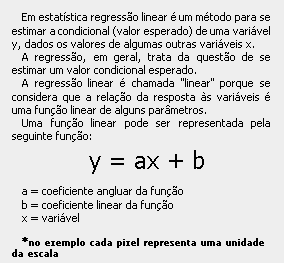
<style>
.page{position:relative;width:284px;height:263px;background:#eeeeee}
.page>*{position:absolute;margin:0}
.t1{font:11px "Tahoma";color:#000000}
.t2{font:24px "Tahoma";color:#000000}
.t3{font:9px "Tahoma";color:#000000;font-weight:bold}
</style>
<div class="page">
<p class="t1" style="left:12px;top:12px;width:258px;height:245px;text-align:justify">Em estatística regressão linear é um método para se estimar a condicional (valor esperado) de uma variável y, dados os valores de algumas outras variáveis x.<br>A regressão, em geral, trata da questão de se estimar um valor condicional esperado.<br>A regressão linear é chamada "linear" porque se considera que a relação da resposta às variáveis é uma função linear de alguns parâmetros.<br>Uma função linear pode ser representada pela seguinte função:<br><span class="t2">y = ax + b<br></span><br>a = coeficiente angluar da função<br>b = coeficiente linear da função<br>x = variável<br><br><span class="t3">*no exemplo cada pixel representa uma unidade da escala</span></p>
</div>
